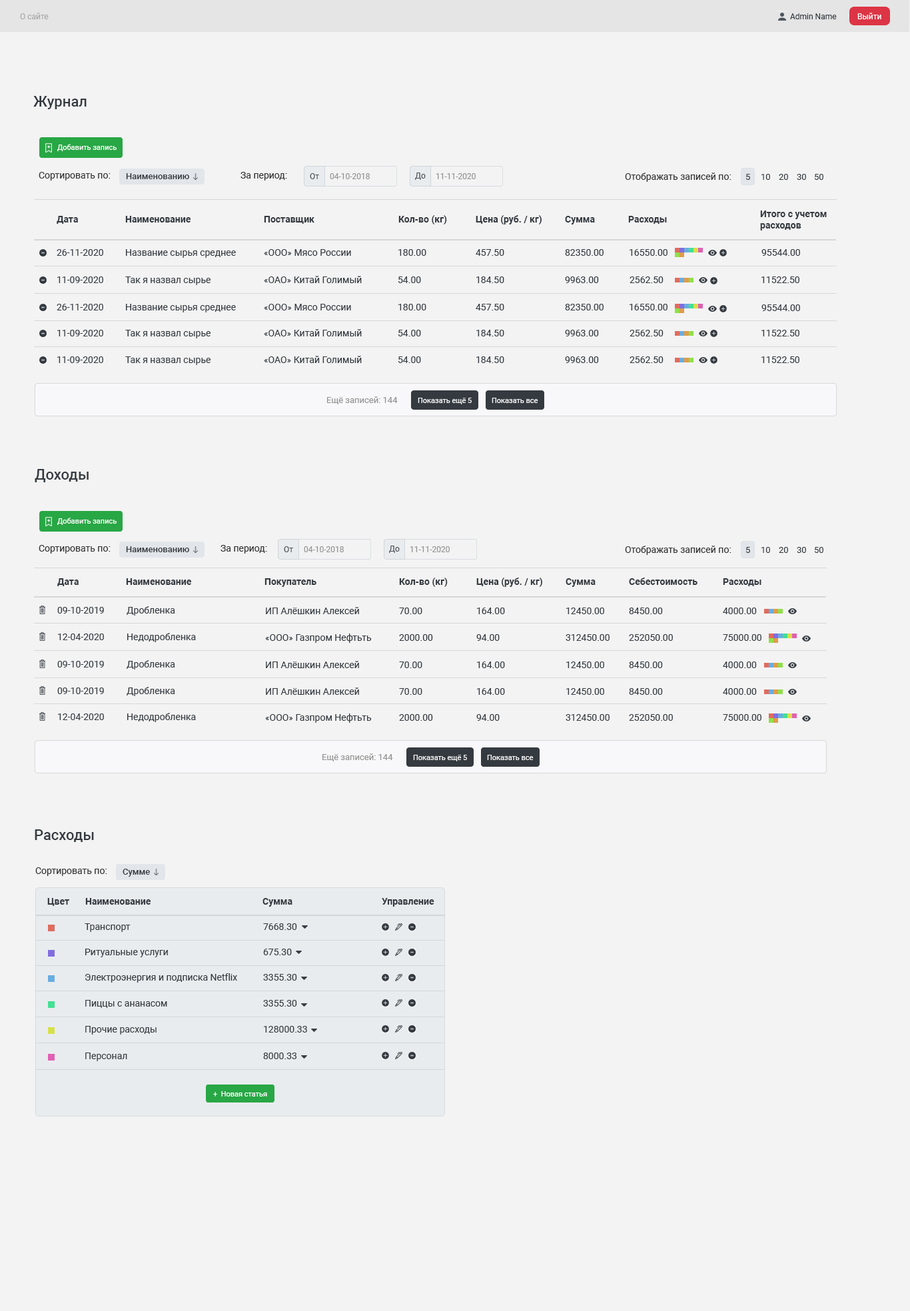
<style>
.page{position:relative;width:910px;height:1311px;background:#f3f3f3}
.page>*{position:absolute;margin:0}
.t1{font:8px "Roboto-Regular";color:#a9a9a9}
.t2{font:8px "Roboto-Regular";color:#343a40}
.t3{font:8px "Roboto-Regular";color:#fefefe}
.t4{font:14.7px "Roboto-Medium";color:#343a40}
.t5{font:7.3px "Roboto-Regular";color:#ffffff}
.t6{font:9.3px "Roboto-Regular";color:#303030}
.t7{font:8.7px "Roboto-Medium";color:#343a40}
.t8{font:8px "Roboto-Regular";color:#495057}
.t9{font:8px "Roboto-Regular";color:#949494}
.t10{font:8.7px "Roboto-Regular";color:#343a40}
.t11{font:9.3px "Roboto-Bold";color:#343a40}
.t12{font:9.3px "Roboto-Regular";color:#343a40}
.t13{font:8.7px "Roboto-Regular";color:#939393}
.t14{font:7.3px "Roboto-Regular";color:#fefefe}
</style>
<div class="page">
<p class="t1" style="left:20px;top:13px;width:29px;height:6px">О сайте</p>
<p class="t2" style="left:790px;top:13px;width:47px;height:6px">Admin Name</p>
<p class="t3" style="left:857px;top:13px;width:24px;height:6px">Выйти</p>
<p class="t4" style="left:33px;top:96px;width:54px;height:13px">Журнал</p>
<p class="t5" style="left:57px;top:144px;width:60px;height:7px">Добавить запись</p>
<p class="t6" style="left:39px;top:172px;width:72px;height:8px">Сортировать по:</p>
<p class="t7" style="left:126px;top:173px;width:63px;height:6px">Наименованию</p>
<p class="t6" style="left:240px;top:172px;width:47px;height:8px">За период:</p>
<p class="t8" style="left:310px;top:173px;width:9px;height:6px">От</p>
<p class="t9" style="left:330px;top:173px;width:40px;height:6px">04-10-2018</p>
<p class="t8" style="left:415px;top:172px;width:11px;height:8px">До</p>
<p class="t9" style="left:436px;top:173px;width:40px;height:6px">11-11-2020</p>
<p class="t6" style="left:625px;top:172px;width:106px;height:10px">Отображать записей по:</p>
<p class="t10" style="left:745px;top:174px;width:5px;height:6px">5</p>
<p class="t10" style="left:761px;top:174px;width:9px;height:6px">10</p>
<p class="t10" style="left:779px;top:174px;width:9px;height:6px">20</p>
<p class="t10" style="left:797px;top:174px;width:9px;height:6px">30</p>
<p class="t10" style="left:814px;top:174px;width:9px;height:6px">50</p>
<p class="t11" style="left:57px;top:216px;width:21px;height:8px">Дата</p>
<p class="t11" style="left:125px;top:216px;width:66px;height:6px">Наименование</p>
<p class="t11" style="left:264px;top:216px;width:50px;height:8px">Поставщик</p>
<p class="t11" style="left:398px;top:215px;width:49px;height:9px">Кол-во (кг)</p>
<p class="t11" style="left:476px;top:215px;width:65px;height:9px">Цена (руб. / кг)</p>
<p class="t11" style="left:565px;top:216px;width:30px;height:8px">Сумма</p>
<p class="t11" style="left:628px;top:216px;width:39px;height:8px">Расходы</p>
<p class="t11" style="left:760px;top:210px;width:67px;height:20px">Итого с учетом<br>расходов</p>
<p class="t12" style="left:57px;top:249px;width:46px;height:7px">26-11-2020</p>
<p class="t12" style="left:126px;top:249px;width:110px;height:9px">Название сырья среднее</p>
<p class="t12" style="left:264px;top:249px;width:87px;height:7px">«ООО» Мясо России</p>
<p class="t12" style="left:398px;top:249px;width:28px;height:7px">180.00</p>
<p class="t12" style="left:476px;top:249px;width:28px;height:7px">457.50</p>
<p class="t12" style="left:565px;top:249px;width:38px;height:7px">82350.00</p>
<p class="t12" style="left:629px;top:249px;width:38px;height:7px">16550.00</p>
<p class="t12" style="left:761px;top:249px;width:39px;height:7px">95544.00</p>
<p class="t12" style="left:57px;top:276px;width:46px;height:7px">11-09-2020</p>
<p class="t12" style="left:125px;top:276px;width:85px;height:9px">Так я назвал сырье</p>
<p class="t12" style="left:264px;top:276px;width:98px;height:7px">«ОАО» Китай Голимый</p>
<p class="t12" style="left:398px;top:276px;width:23px;height:7px">54.00</p>
<p class="t12" style="left:476px;top:276px;width:28px;height:7px">184.50</p>
<p class="t12" style="left:565px;top:276px;width:34px;height:7px">9963.00</p>
<p class="t12" style="left:629px;top:276px;width:34px;height:7px">2562.50</p>
<p class="t12" style="left:761px;top:276px;width:38px;height:7px">11522.50</p>
<p class="t12" style="left:57px;top:304px;width:46px;height:6px">26-11-2020</p>
<p class="t12" style="left:126px;top:304px;width:110px;height:8px">Название сырья среднее</p>
<p class="t12" style="left:264px;top:304px;width:87px;height:6px">«ООО» Мясо России</p>
<p class="t12" style="left:398px;top:304px;width:28px;height:6px">180.00</p>
<p class="t12" style="left:476px;top:304px;width:28px;height:6px">457.50</p>
<p class="t12" style="left:565px;top:304px;width:38px;height:6px">82350.00</p>
<p class="t12" style="left:629px;top:304px;width:38px;height:6px">16550.00</p>
<p class="t12" style="left:761px;top:304px;width:39px;height:7px">95544.00</p>
<p class="t12" style="left:57px;top:330px;width:46px;height:6px">11-09-2020</p>
<p class="t12" style="left:125px;top:330px;width:85px;height:8px">Так я назвал сырье</p>
<p class="t12" style="left:264px;top:329px;width:98px;height:7px">«ОАО» Китай Голимый</p>
<p class="t12" style="left:398px;top:330px;width:23px;height:6px">54.00</p>
<p class="t12" style="left:476px;top:330px;width:28px;height:6px">184.50</p>
<p class="t12" style="left:565px;top:330px;width:34px;height:6px">9963.00</p>
<p class="t12" style="left:629px;top:330px;width:34px;height:6px">2562.50</p>
<p class="t12" style="left:761px;top:330px;width:38px;height:6px">11522.50</p>
<p class="t12" style="left:57px;top:356px;width:46px;height:7px">11-09-2020</p>
<p class="t12" style="left:125px;top:356px;width:85px;height:9px">Так я назвал сырье</p>
<p class="t12" style="left:264px;top:356px;width:98px;height:7px">«ОАО» Китай Голимый</p>
<p class="t12" style="left:398px;top:356px;width:23px;height:7px">54.00</p>
<p class="t12" style="left:476px;top:356px;width:28px;height:7px">184.50</p>
<p class="t12" style="left:565px;top:356px;width:34px;height:7px">9963.00</p>
<p class="t12" style="left:629px;top:356px;width:34px;height:7px">2562.50</p>
<p class="t12" style="left:761px;top:356px;width:38px;height:7px">11522.50</p>
<p class="t13" style="left:327px;top:396px;width:71px;height:8px">Ещё записей: 144</p>
<p class="t14" style="left:418px;top:398px;width:54px;height:6px">Показать ещё 5</p>
<p class="t5" style="left:492px;top:398px;width:46px;height:5px">Показать все</p>
<p class="t4" style="left:35px;top:469px;width:54px;height:13px">Доходы</p>
<p class="t5" style="left:57px;top:517px;width:60px;height:8px">Добавить запись</p>
<p class="t6" style="left:39px;top:545px;width:72px;height:8px">Сортировать по:</p>
<p class="t6" style="left:220px;top:545px;width:47px;height:8px">За период:</p>
<p class="t8" style="left:389px;top:545px;width:11px;height:8px">До</p>
<p class="t6" style="left:625px;top:545px;width:106px;height:10px">Отображать записей по:</p>
<p class="t7" style="left:126px;top:546px;width:63px;height:6px">Наименованию</p>
<p class="t8" style="left:284px;top:546px;width:9px;height:6px">От</p>
<p class="t9" style="left:304px;top:546px;width:40px;height:6px">04-10-2018</p>
<p class="t9" style="left:410px;top:546px;width:40px;height:6px">11-11-2020</p>
<p class="t10" style="left:745px;top:547px;width:5px;height:6px">5</p>
<p class="t10" style="left:761px;top:547px;width:9px;height:6px">10</p>
<p class="t10" style="left:779px;top:547px;width:9px;height:6px">20</p>
<p class="t10" style="left:797px;top:547px;width:9px;height:6px">30</p>
<p class="t10" style="left:814px;top:547px;width:9px;height:6px">50</p>
<p class="t11" style="left:57px;top:578px;width:22px;height:8px">Дата</p>
<p class="t11" style="left:126px;top:578px;width:66px;height:7px">Наименование</p>
<p class="t11" style="left:264px;top:578px;width:52px;height:9px">Покупатель</p>
<p class="t11" style="left:399px;top:577px;width:49px;height:10px">Кол-во (кг)</p>
<p class="t11" style="left:476px;top:577px;width:66px;height:10px">Цена (руб. / кг)</p>
<p class="t11" style="left:565px;top:578px;width:30px;height:9px">Сумма</p>
<p class="t11" style="left:629px;top:577px;width:68px;height:8px">Себестоимость</p>
<p class="t11" style="left:723px;top:578px;width:38px;height:8px">Расходы</p>
<p class="t12" style="left:57px;top:607px;width:47px;height:6px">09-10-2019</p>
<p class="t12" style="left:127px;top:606px;width:48px;height:9px">Дробленка</p>
<p class="t12" style="left:266px;top:607px;width:93px;height:7px">ИП Алёшкин Алексей</p>
<p class="t12" style="left:399px;top:607px;width:23px;height:7px">70.00</p>
<p class="t12" style="left:477px;top:607px;width:28px;height:7px">164.00</p>
<p class="t12" style="left:566px;top:607px;width:38px;height:7px">12450.00</p>
<p class="t12" style="left:629px;top:607px;width:34px;height:7px">8450.00</p>
<p class="t12" style="left:723px;top:607px;width:34px;height:7px">4000.00</p>
<p class="t12" style="left:58px;top:633px;width:46px;height:7px">12-04-2020</p>
<p class="t12" style="left:127px;top:633px;width:69px;height:9px">Недодробленка</p>
<p class="t12" style="left:265px;top:633px;width:107px;height:10px">«ООО» Газпром Нефтьть</p>
<p class="t12" style="left:399px;top:634px;width:34px;height:7px">2000.00</p>
<p class="t12" style="left:476px;top:634px;width:24px;height:7px">94.00</p>
<p class="t12" style="left:565px;top:634px;width:44px;height:7px">312450.00</p>
<p class="t12" style="left:629px;top:634px;width:44px;height:7px">252050.00</p>
<p class="t12" style="left:723px;top:634px;width:38px;height:7px">75000.00</p>
<p class="t12" style="left:57px;top:661px;width:47px;height:6px">09-10-2019</p>
<p class="t12" style="left:127px;top:660px;width:48px;height:9px">Дробленка</p>
<p class="t12" style="left:266px;top:661px;width:93px;height:7px">ИП Алёшкин Алексей</p>
<p class="t12" style="left:399px;top:661px;width:23px;height:7px">70.00</p>
<p class="t12" style="left:477px;top:661px;width:28px;height:7px">164.00</p>
<p class="t12" style="left:566px;top:661px;width:38px;height:7px">12450.00</p>
<p class="t12" style="left:629px;top:661px;width:34px;height:7px">8450.00</p>
<p class="t12" style="left:723px;top:661px;width:34px;height:7px">4000.00</p>
<p class="t12" style="left:57px;top:687px;width:47px;height:7px">09-10-2019</p>
<p class="t12" style="left:127px;top:687px;width:48px;height:9px">Дробленка</p>
<p class="t12" style="left:266px;top:687px;width:93px;height:8px">ИП Алёшкин Алексей</p>
<p class="t12" style="left:399px;top:688px;width:23px;height:7px">70.00</p>
<p class="t12" style="left:477px;top:688px;width:28px;height:7px">164.00</p>
<p class="t12" style="left:566px;top:688px;width:38px;height:7px">12450.00</p>
<p class="t12" style="left:629px;top:688px;width:34px;height:7px">8450.00</p>
<p class="t12" style="left:723px;top:688px;width:34px;height:7px">4000.00</p>
<p class="t12" style="left:58px;top:713px;width:46px;height:7px">12-04-2020</p>
<p class="t12" style="left:127px;top:713px;width:69px;height:9px">Недодробленка</p>
<p class="t12" style="left:265px;top:713px;width:107px;height:10px">«ООО» Газпром Нефтьть</p>
<p class="t12" style="left:399px;top:714px;width:34px;height:7px">2000.00</p>
<p class="t12" style="left:476px;top:714px;width:24px;height:7px">94.00</p>
<p class="t12" style="left:565px;top:714px;width:44px;height:7px">312450.00</p>
<p class="t12" style="left:629px;top:714px;width:44px;height:7px">252050.00</p>
<p class="t12" style="left:723px;top:714px;width:38px;height:7px">75000.00</p>
<p class="t13" style="left:322px;top:753px;width:71px;height:8px">Ещё записей: 144</p>
<p class="t14" style="left:413px;top:755px;width:54px;height:6px">Показать ещё 5</p>
<p class="t5" style="left:487px;top:755px;width:46px;height:5px">Показать все</p>
<p class="t4" style="left:35px;top:829px;width:59px;height:13px">Расходы</p>
<p class="t6" style="left:35px;top:867px;width:72px;height:9px">Сортировать по:</p>
<p class="t7" style="left:123px;top:868px;width:27px;height:8px">Сумме</p>
<p class="t11" style="left:47px;top:898px;width:22px;height:8px">Цвет</p>
<p class="t11" style="left:85px;top:898px;width:66px;height:6px">Наименование</p>
<p class="t11" style="left:262px;top:898px;width:30px;height:8px">Сумма</p>
<p class="t11" style="left:382px;top:898px;width:52px;height:8px">Управление</p>
<p class="t12" style="left:85px;top:923px;width:46px;height:9px">Транспорт</p>
<p class="t12" style="left:263px;top:923px;width:34px;height:7px">7668.30</p>
<p class="t12" style="left:85px;top:948px;width:83px;height:9px">Ритуальные услуги</p>
<p class="t12" style="left:263px;top:948px;width:29px;height:7px">675.30</p>
<p class="t12" style="left:85px;top:973px;width:152px;height:9px">Электроэнергия и подписка Netflix</p>
<p class="t12" style="left:263px;top:974px;width:34px;height:6px">3355.30</p>
<p class="t12" style="left:85px;top:1000px;width:82px;height:8px">Пиццы с ананасом</p>
<p class="t12" style="left:263px;top:1000px;width:34px;height:6px">3355.30</p>
<p class="t12" style="left:85px;top:1026px;width:72px;height:8px">Прочие расходы</p>
<p class="t12" style="left:264px;top:1026px;width:43px;height:6px">128000.33</p>
<p class="t12" style="left:85px;top:1052px;width:42px;height:9px">Персонал</p>
<p class="t12" style="left:263px;top:1052px;width:34px;height:7px">8000.33</p>
<p class="t5" style="left:213px;top:1091px;width:54px;height:5px">+  Новая статья</p>
</div>
